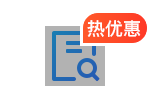
<style>
.page{position:relative;width:150px;height:100px;background:#ffffff}
.page>*{position:absolute;margin:0}
.t1{font:18px "PingFangSC-Medium";color:#ffffff}
</style>
<div class="page">
<p class="t1" style="left:87px;top:20px;width:54px;height:17px">热优惠</p>
</div>
